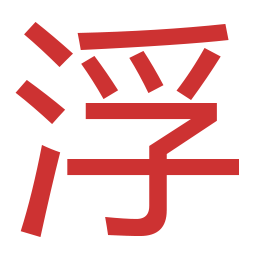
<style>
.page{position:relative;width:256px;height:256px;background:#ffffff}
.page>*{position:absolute;margin:0}
.t1{font:229.2px "MicrosoftYaHei";color:#cd3232}
</style>
<div class="page">
<p class="t1" style="left:15px;top:22px;width:224px;height:215px">浮</p>
</div>
